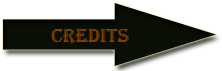
<style>
.page{position:relative;width:222px;height:71px;background:#ffffff}
.page>*{position:absolute;margin:0}
.t1{font:20px "Algerian";color:#7e3e04}
</style>
<div class="page">
<p class="t1" style="left:51px;top:29px;width:78px;height:15px">Credits</p>
</div>
